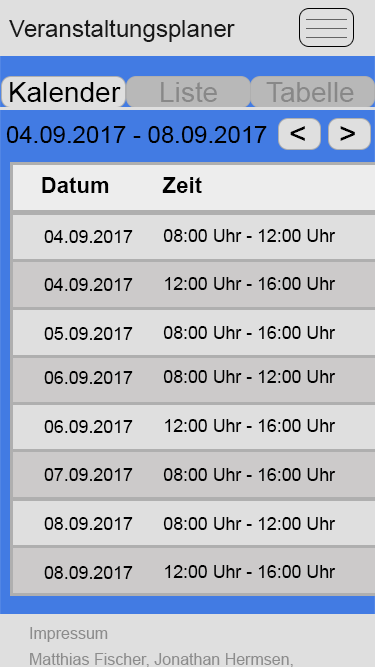
<style>
.page{position:relative;width:375px;height:667px;background:#dfdfdf}
.page>*{position:absolute;margin:0}
.t1{font:24px "ArialMT";color:#191919}
.t2{font:28px "ArialMT";color:#000000}
.t3{font:28px "ArialMT";color:#888888}
.t4{font:24px "ArialMT";color:#000000}
.t5{font:30px "ArialMT";color:#000000}
.t6{font:22.1px "Arial-BoldMT";color:#000000}
.t7{font:17.7px "ArialMT";color:#000000}
.t8{font:16px "ArialMT";color:#8c8c8c}
</style>
<div class="page">
<p class="t1" style="left:9px;top:19px;width:226px;height:23px">Veranstaltungsplaner</p>
<p class="t2" style="left:10px;top:82px;width:111px;height:20px">Kalender</p>
<p class="t3" style="left:161px;top:82px;width:56px;height:20px">Liste</p>
<p class="t3" style="left:266px;top:82px;width:88px;height:20px">Tabelle</p>
<p class="t4" style="left:6px;top:126px;width:261px;height:17px">04.09.2017 - 08.09.2017</p>
<p class="t5" style="left:290px;top:126px;width:15px;height:15px">&lt;</p>
<p class="t5" style="left:340px;top:126px;width:15px;height:15px">&gt;</p>
<p class="t6" style="left:42px;top:177px;width:67px;height:16px">Datum</p>
<p class="t6" style="left:162px;top:177px;width:40px;height:16px">Zeit</p>
<p class="t7" style="left:44px;top:230px;width:89px;height:13px">04.09.2017</p>
<p class="t7" style="left:163px;top:229px;width:173px;height:13px">08:00 Uhr - 12:00 Uhr</p>
<p class="t7" style="left:44px;top:278px;width:89px;height:13px">04.09.2017</p>
<p class="t7" style="left:165px;top:277px;width:171px;height:13px">12:00 Uhr - 16:00 Uhr</p>
<p class="t7" style="left:44px;top:327px;width:89px;height:13px">05.09.2017</p>
<p class="t7" style="left:163px;top:326px;width:173px;height:13px">08:00 Uhr - 16:00 Uhr</p>
<p class="t7" style="left:44px;top:371px;width:89px;height:13px">06.09.2017</p>
<p class="t7" style="left:163px;top:370px;width:173px;height:13px">08:00 Uhr - 12:00 Uhr</p>
<p class="t7" style="left:44px;top:420px;width:89px;height:13px">06.09.2017</p>
<p class="t7" style="left:165px;top:419px;width:171px;height:13px">12:00 Uhr - 16:00 Uhr</p>
<p class="t7" style="left:44px;top:468px;width:89px;height:13px">07.09.2017</p>
<p class="t7" style="left:163px;top:468px;width:173px;height:13px">08:00 Uhr - 16:00 Uhr</p>
<p class="t7" style="left:44px;top:517px;width:89px;height:13px">08.09.2017</p>
<p class="t7" style="left:163px;top:517px;width:173px;height:13px">08:00 Uhr - 12:00 Uhr</p>
<p class="t7" style="left:44px;top:566px;width:89px;height:13px">08.09.2017</p>
<p class="t7" style="left:165px;top:565px;width:171px;height:13px">12:00 Uhr - 16:00 Uhr</p>
<p class="t8" style="left:30px;top:627px;width:78px;height:15px">Impressum</p>
</div>
